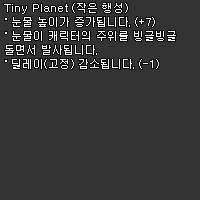
<style>
.page{position:relative;width:200px;height:200px;background:#333333}
.page>*{position:absolute;margin:0}
.t1{font:11px/14px "Dotum";color:#ffffff}
</style>
<div class="page">
<p class="t1" style="left:4px;top:3px;width:172px;height:66px">Tiny Planet (작은 행성)<br>˚ 눈물 높이가 증가됩니다. (+7)<br>˚ 눈물이 캐릭터의 주위를 빙글빙글<br>돌면서 발사됩니다.<br>˚ 딜레이(고정) 감소됩니다. (-1)</p>
</div>
